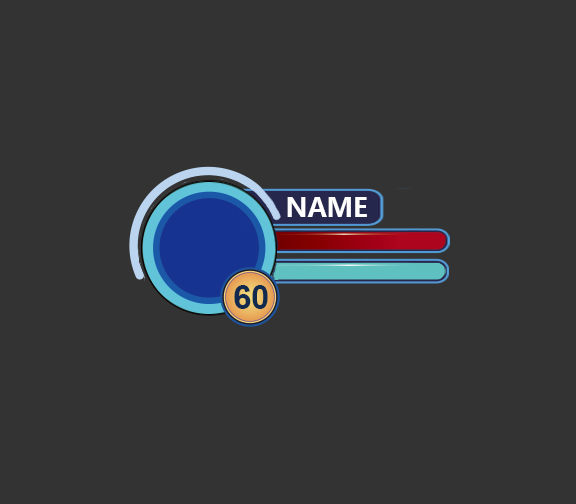
<style>
.page{position:relative;width:576px;height:504px;background:#333333}
.page>*{position:absolute;margin:0}
.t1{font:25.8px "MicrosoftYaHei-Bold";color:#ffffff}
.t2{font:32.8px "Arial-BoldMT";color:#122a4d}
</style>
<div class="page">
<p class="t1" style="left:287px;top:197px;width:80px;height:20px">NAME</p>
<p class="t2" style="left:234px;top:285px;width:34px;height:24px">60</p>
</div>
